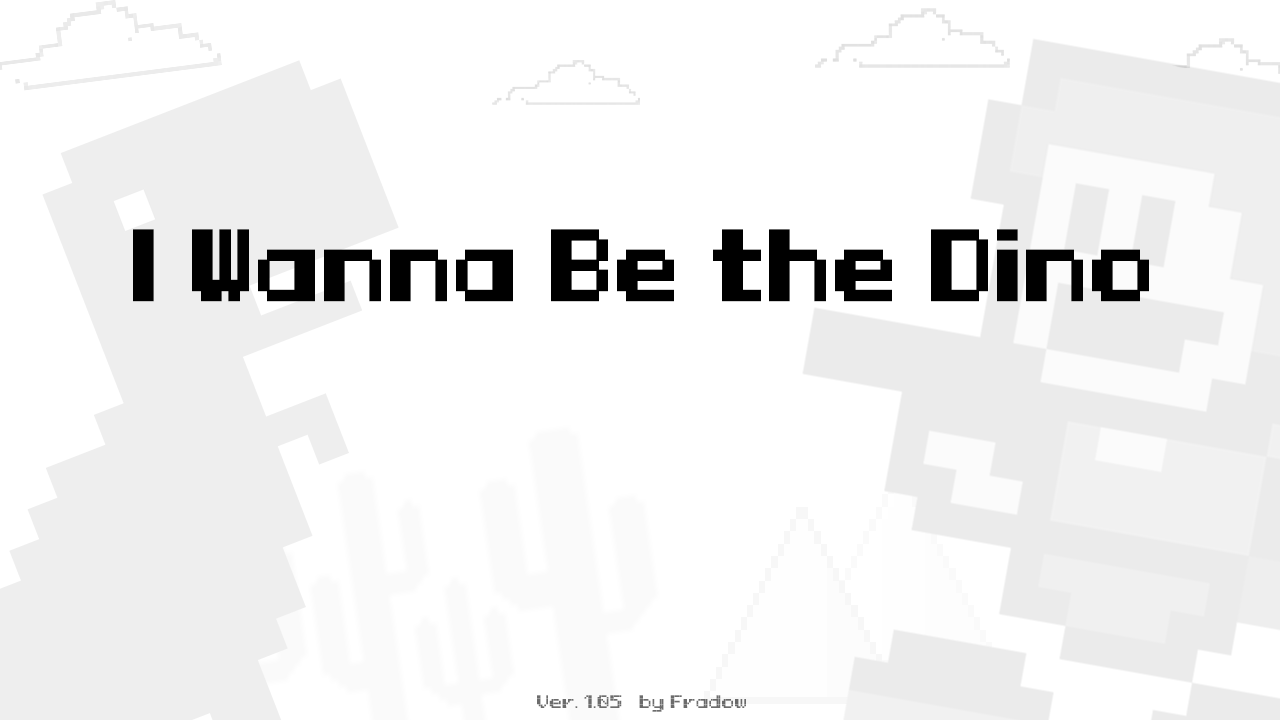
<style>
.page{position:relative;width:1280px;height:720px;background:#ffffff}
.page>*{position:absolute;margin:0}
.t1{font:100.8px "LLPixelFun-Regular";color:#000000;font-weight:bold;scale:0.9 1}
.t2{font:18.3px "LLPixelFun-Regular";color:#6c6c6c}
</style>
<div class="page">
<p class="t1" style="left:133px;top:229px;width:1016px;height:73px">I Wanna Be the Dino</p>
<p class="t2" style="left:537px;top:695px;width:209px;height:17px">Ver. 1.05   by Fradow</p>
</div>
